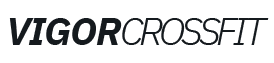
<style>
.page{position:relative;width:274px;height:63px;background:#ffffff}
.page>*{position:absolute;margin:0}
.t1{font:38.6px "IBMPlexSans-BoldItalic";letter-spacing:-0.025em;color:#151a1e;text-transform:uppercase}
.t2{font:38.6px "IBMPlexSans-LightItalic";letter-spacing:-0.1em;color:#151a1e;text-transform:uppercase}
</style>
<div class="page">
<p class="t1" style="left:9px;top:18px;width:113px;height:27px">vigor</p>
<p class="t2" style="left:122px;top:18px;width:147px;height:27px">crossfit</p>
</div>
